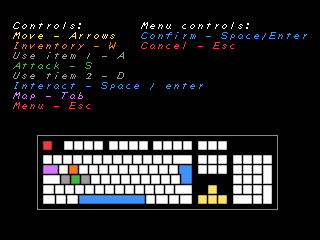
<style>
.page{position:relative;width:320px;height:240px;background:#000000}
.page>*{position:absolute;margin:0}
.t1{font:11px/10px "ZAPFont";color:#3e93f9}
.t2{font:11px/10px "ZAPFont";color:#ffffff}
.t3{font:11px/10px "ZAPFont";color:#ffe269}
.t4{font:11px/10px "ZAPFont";color:#f87820}
.t5{font:11px/10px "ZAPFont";color:#9f9999}
.t6{font:11px/10px "ZAPFont";color:#41b541}
.t7{font:11px/10px "ZAPFont";color:#d978ff}
.t8{font:11px/10px "ZAPFont";color:#f43939}
</style>
<div class="page">
<p class="t1" style="left:13px;top:22px;width:190px;height:87px"><span class="t2">Controls:<br></span><span class="t3">Move - Arrows<br></span><span class="t4">Inventory - W<br></span><span class="t5">Use item 1 - A <br></span><span class="t6">Attack - S<br></span><span class="t5">Use tiem 2 - D<br></span>Interact - Space / enter<br><span class="t7">Map - Tab<br></span><span class="t8">Menu - Esc</span></p>
<p class="t1" style="left:141px;top:22px;width:166px;height:27px"><span class="t2">Menu controls:<br></span>Confirm - Space/Enter<br><span class="t8">Cancel - Esc</span></p>
</div>
